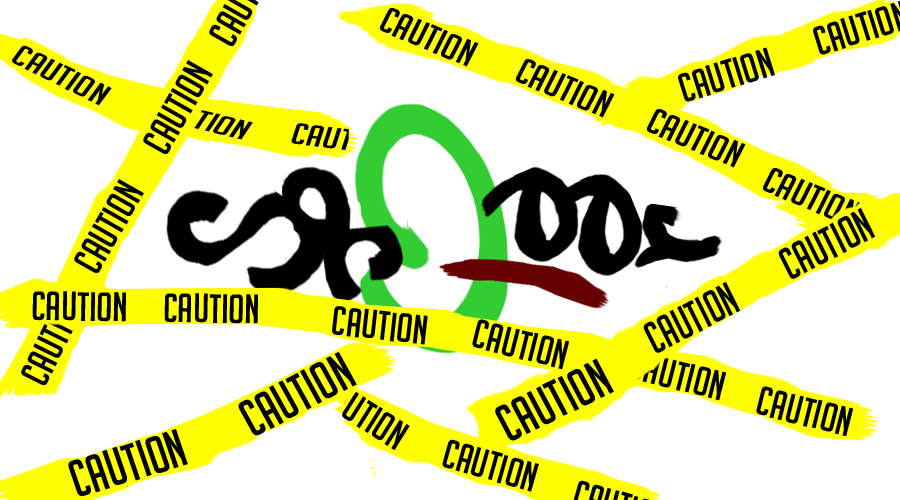
<style>
.page{position:relative;width:900px;height:500px;background:#ffffff}
.page>*{position:absolute;margin:0}
.t1{font:35.7px "BigNoodleTitling";color:#000000;scale:1.15 1}
.t2{font:30px "BigNoodleTitling";color:#000000;scale:1.4 1}
.t3{font:40px "BigNoodleTitling";color:#000000}
.t4{font:44.6px "BigNoodleTitling";color:#000000;scale:0.91 1}
.t5{font:51.9px "BigNoodleTitling";color:#000000;scale:0.94 1}
</style>
<div class="page">
<p class="t1" style="left:379px;top:8px;width:100px;height:59px;rotate:23deg">CAUTION</p>
<p class="t2" style="left:12px;top:45px;width:100px;height:61px;rotate:26deg">CAUTION</p>
<p class="t3" style="left:678px;top:47px;width:97px;height:55px;rotate:-17deg">CAUTION</p>
<p class="t3" style="left:143px;top:60px;width:70px;height:94px;rotate:-60deg">CAUTION</p>
<p class="t1" style="left:515px;top:59px;width:100px;height:59px;rotate:23deg">CAUTION</p>
<p class="t1" style="left:646px;top:109px;width:100px;height:59px;rotate:23deg">CAUTION</p>
<p class="t3" style="left:74px;top:179px;width:70px;height:94px;rotate:-60deg">CAUTION</p>
<p class="t4" style="left:778px;top:208px;width:98px;height:71px;rotate:-28deg">CAUTION</p>
<p class="t3" style="left:32px;top:291px;width:94px;height:31px;rotate:1deg">CAUTION</p>
<p class="t3" style="left:164px;top:293px;width:94px;height:31px;rotate:1deg">CAUTION</p>
<p class="t4" style="left:643px;top:282px;width:98px;height:71px;rotate:-28deg">CAUTION</p>
<p class="t3" style="left:332px;top:306px;width:96px;height:39px;rotate:6deg">CAUTION</p>
<p class="t3" style="left:472px;top:319px;width:98px;height:51px;rotate:14deg">CAUTION</p>
<p class="t5" style="left:238px;top:351px;width:119px;height:85px;rotate:-27deg">CAUTION</p>
<p class="t5" style="left:495px;top:358px;width:119px;height:83px;rotate:-26deg">CAUTION</p>
<p class="t3" style="left:756px;top:386px;width:98px;height:51px;rotate:14deg">CAUTION</p>
<p class="t5" style="left:68px;top:429px;width:120px;height:68px;rotate:-17deg">CAUTION</p>
<p class="t3" style="left:442px;top:439px;width:97px;height:53px;rotate:16deg">CAUTION</p>
</div>
